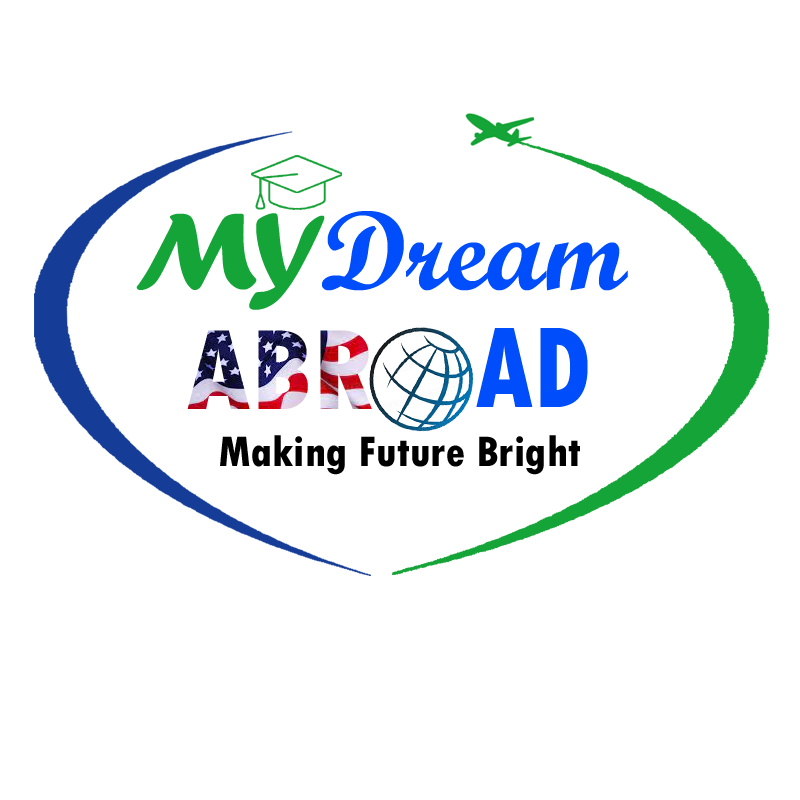
<style>
.page{position:relative;width:800px;height:800px;background:#ffffff}
.page>*{position:absolute;margin:0}
.t1{font:114.2px "ForteMT";color:#15a437}
.t2{font:112.1px "ScriptMTBold";color:#004dfb}
.t3{font:121px "TwCenMT-CondensedExtraBold";color:#004dfb;scale:0.9 1}
.t4{font:120.5px "TwCenMT-CondensedExtraBold"}
.t5{font:44.7px "TwCenMT-CondensedExtraBold";color:#000000}
</style>
<div class="page">
<p class="t1" style="left:136px;top:213px;width:189px;height:97px">MY</p>
<p class="t2" style="left:322px;top:211px;width:306px;height:80px">Dream</p>
<p class="t3" style="left:476px;top:328px;width:112px;height:79px">AD</p>
<p class="t4" style="left:187px;top:330px;width:185px;height:79px">ABR</p>
<p class="t5" style="left:220px;top:435px;width:360px;height:40px">Making Future Bright</p>
</div>
